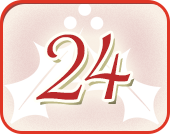
<style>
.page{position:relative;width:170px;height:134px}
.page>*{position:absolute;margin:0}
.t1{font:160px "SavoyeLetPlain";letter-spacing:-0.025em;color:#ba2a2a}
</style>
<div class="page">
<p class="t1" style="left:36px;top:33px;width:95px;height:67px">24</p>
</div>
